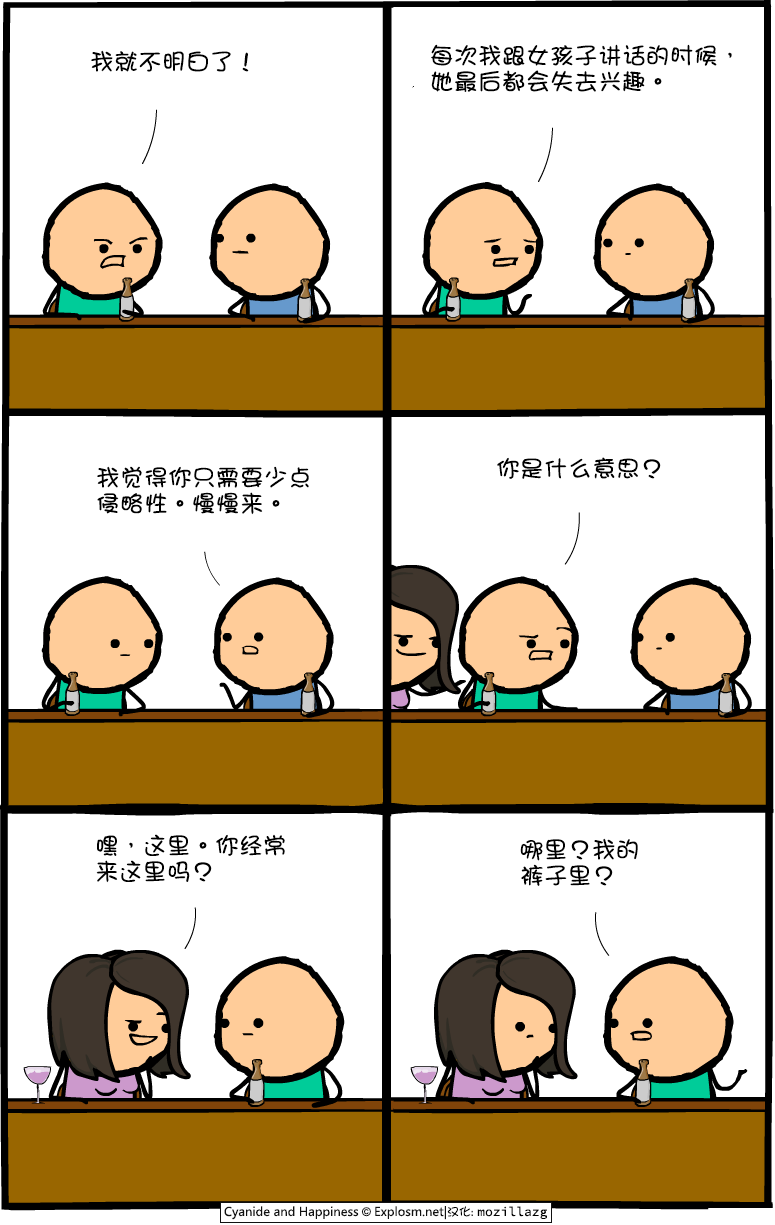
<style>
.page{position:relative;width:775px;height:1225px;background:#ffffff}
.page>*{position:absolute;margin:0}
.t1{font:24px "DFGirl";color:#000000}
.t2{font:24px/26px "DFGirl";color:#000000}
</style>
<div class="page">
<p class="t1" style="left:91px;top:50px;width:158px;height:22px">我就不明白了！</p>
<p class="t2" style="left:431px;top:44px;width:301px;height:48px">每次我跟女孩子讲话的时候，<br>她最后都会失去兴趣。</p>
<p class="t1" style="left:497px;top:457px;width:164px;height:22px">你是什么意思？</p>
<p class="t2" style="left:97px;top:466px;width:212px;height:49px">我觉得你只需要少点<br>侵略性。慢慢来。</p>
<p class="t2" style="left:96px;top:834px;width:189px;height:49px">嘿，这里。你经常<br>来这里吗？</p>
<p class="t2" style="left:520px;top:838px;width:118px;height:48px">哪里？我的<br>裤子里？</p>
</div>
